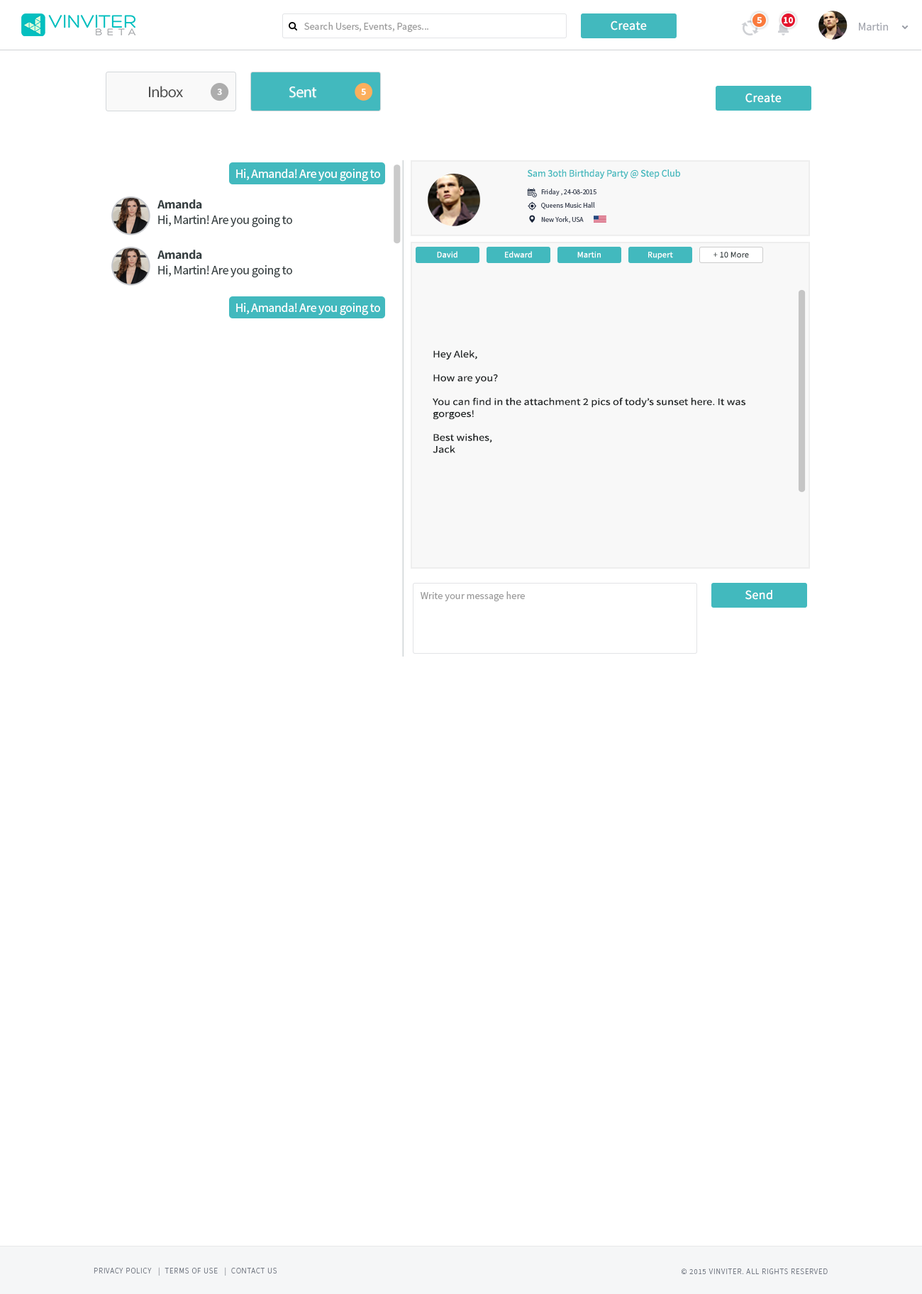
<style>
.page{position:relative;width:922px;height:1294px;background:#ffffff}
.page>*{position:absolute;margin:0}
.t1{font:9.2px "SourceSansPro-Bold";color:#ffffff}
.t2{font:10.2px "SourceSansPro-Regular";color:#999999}
.t3{font:12.8px "SourceSansPro-Regular";letter-spacing:0.02em;color:#ffffff}
.t4{font:11.3px "SourceSansPro-Regular";color:#a3a6ae}
.t5{font:15.6px "MyriadPro-Regular";letter-spacing:-0.025em;color:#4b4b4b}
.t6{font:9.9px "SourceSansPro-Bold";letter-spacing:-0.025em;color:#ffffff}
.t7{font:15.6px "MyriadPro-Regular";letter-spacing:-0.025em;color:#ffffff}
.t8{font:12.8px "SourceSansPro-Regular";letter-spacing:-0.025em;color:#ffffff}
.t9{font:9.9px "SourceSansPro-Regular";color:#42b9be}
.t10{font:7.1px/9.2px "SourceSansPro-Regular";color:#464d5c}
.t11{font:12.8px "SourceSansPro-Bold";letter-spacing:-0.025em;color:#363f41}
.t12{font:12.8px "SourceSansPro-Regular";letter-spacing:-0.025em;color:#363f41}
.t13{font:8.4px "SourceSansPro-Regular";letter-spacing:0.02em;color:#ffffff}
.t14{font:8.4px "SourceSansPro-Regular";letter-spacing:0.02em;color:#363f41}
.t15{font:9.9px "SourceSansPro-Regular";color:#202425;scale:1.17 1}
.t16{font:7.8px "SourceSansPro-Light";letter-spacing:0.075em;color:#747a85;text-transform:uppercase}
</style>
<div class="page">
<p class="t1" style="left:756px;top:17px;width:5px;height:6px">5</p>
<p class="t1" style="left:783px;top:17px;width:10px;height:6px">10</p>
<p class="t2" style="left:304px;top:22px;width:124px;height:11px">Search Users, Events, Pages...</p>
<p class="t3" style="left:610px;top:21px;width:37px;height:9px">Create</p>
<p class="t4" style="left:859px;top:23px;width:29px;height:7px">Martin</p>
<p class="t5" style="left:149px;top:86px;width:34px;height:12px">Inbox</p>
<p class="t6" style="left:217px;top:89px;width:5px;height:6px">3</p>
<p class="t7" style="left:289px;top:86px;width:27px;height:12px">Sent</p>
<p class="t6" style="left:361px;top:89px;width:5px;height:6px">5</p>
<p class="t3" style="left:745px;top:93px;width:36px;height:10px">Create</p>
<p class="t8" style="left:236px;top:169px;width:144px;height:12px">Hi, Amanda! Are you going to</p>
<p class="t9" style="left:527px;top:169px;width:153px;height:10px">Sam 3oth Birthday Party @ Step Club</p>
<p class="t10" style="left:541px;top:189px;width:55px;height:34px">Friday , 24-08-2015<br>Queens Music Hall<br>New York, USA</p>
<p class="t11" style="left:157px;top:199px;width:45px;height:10px">Amanda</p>
<p class="t12" style="left:158px;top:215px;width:134px;height:13px">Hi, Martin! Are you going to</p>
<p class="t11" style="left:157px;top:250px;width:45px;height:9px">Amanda</p>
<p class="t13" style="left:437px;top:251px;width:20px;height:7px">David</p>
<p class="t13" style="left:505px;top:251px;width:27px;height:7px">Edward</p>
<p class="t13" style="left:577px;top:251px;width:23px;height:7px">Martin</p>
<p class="t13" style="left:648px;top:252px;width:25px;height:7px">Rupert</p>
<p class="t14" style="left:713px;top:252px;width:36px;height:6px">+ 10 More</p>
<p class="t12" style="left:158px;top:265px;width:134px;height:13px">Hi, Martin! Are you going to</p>
<p class="t8" style="left:236px;top:303px;width:144px;height:12px">Hi, Amanda! Are you going to</p>
<p class="t15" style="left:432px;top:350px;width:313px;height:103px">Hey Alek,<br><br>How are you?<br><br>You can find in the attachment 2 pics of tody’s sunset here. It was gorgoes!<br><br>Best wishes,<br>Jack</p>
<p class="t2" style="left:420px;top:591px;width:105px;height:11px">Write your message here</p>
<p class="t3" style="left:745px;top:590px;width:27px;height:10px">Send</p>
<p class="t16" style="left:94px;top:1267px;width:183px;height:8px">Privacy Policy   |  Terms of Use   |  Contact us</p>
<p class="t16" style="left:681px;top:1268px;width:146px;height:6px">© 2015 VINVITER. All rights reserved</p>
</div>
